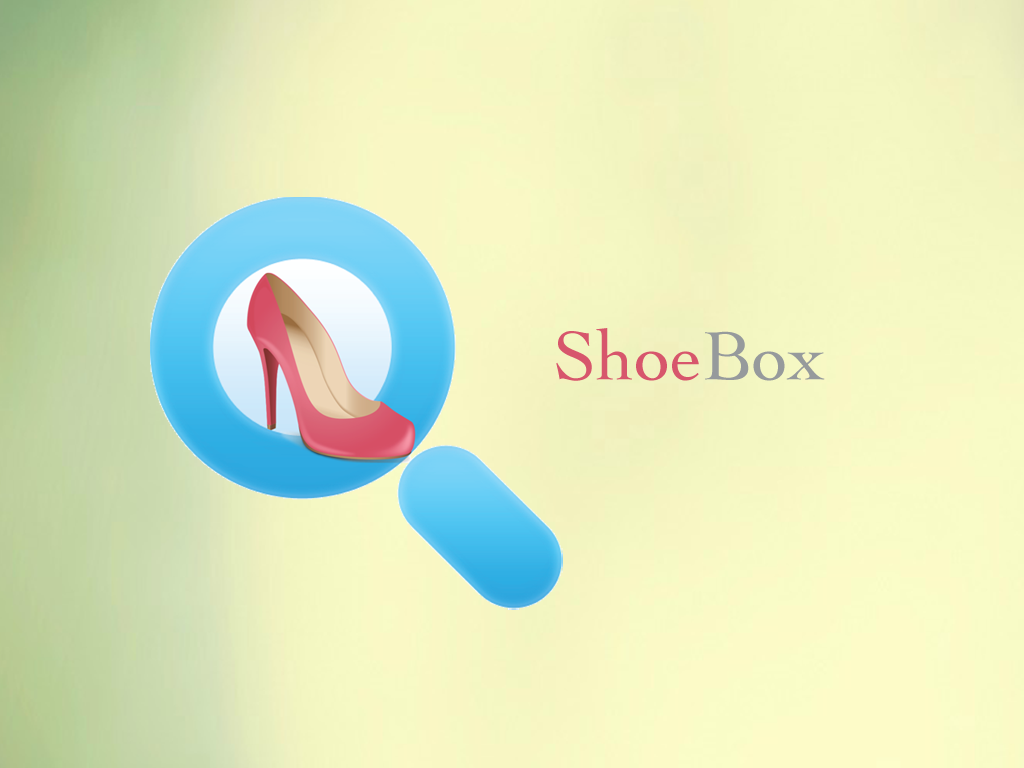
<style>
.page{position:relative;width:1024px;height:768px}
.page>*{position:absolute;margin:0}
.t1{font:72px "Cochin";color:#d7566c}
.t2{font:72px "Cochin";color:#969a9c}
</style>
<div class="page">
<p class="t1" style="left:556px;top:328px;width:269px;height:53px">Shoe<span class="t2">Box</span></p>
</div>
